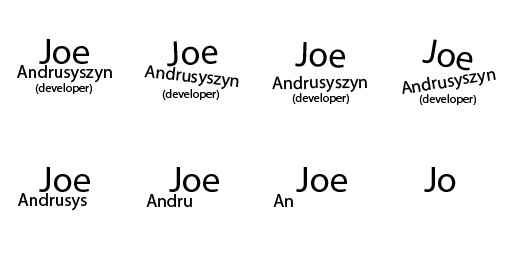
<style>
.page{position:relative;width:512px;height:256px;background:#ffffff}
.page>*{position:absolute;margin:0}
.t1{font:36px "MyriadPro-Regular";color:#000000}
.t2{font:18px "MyriadPro-Regular";color:#000000}
.t3{font:12px "MyriadPro-Regular";color:#000000}
</style>
<div class="page">
<p class="t1" style="left:39px;top:39px;width:50px;height:25px">Joe</p>
<p class="t1" style="left:167px;top:41px;width:51px;height:26px;rotate:-3deg">Joe</p>
<p class="t1" style="left:422px;top:39px;width:51px;height:32px;rotate:10deg">Joe</p>
<p class="t1" style="left:295px;top:42px;width:50px;height:26px;rotate:2deg">Joe</p>
<p class="t2" style="left:17px;top:65px;width:95px;height:18px">Andrusyszyn</p>
<p class="t2" style="left:144px;top:65px;width:95px;height:25px;rotate:6deg">Andrusyszyn</p>
<p class="t2" style="left:272px;top:76px;width:95px;height:16px;rotate:-1deg">Andrusyszyn</p>
<p class="t2" style="left:402px;top:71px;width:94px;height:23px;rotate:-9deg">Andrusyszyn</p>
<p class="t3" style="left:35px;top:83px;width:57px;height:11px">(developer)</p>
<p class="t3" style="left:162px;top:89px;width:57px;height:11px">(developer)</p>
<p class="t3" style="left:292px;top:93px;width:57px;height:11px">(developer)</p>
<p class="t3" style="left:419px;top:94px;width:57px;height:11px">(developer)</p>
<p class="t1" style="left:39px;top:167px;width:51px;height:25px">Joe</p>
<p class="t1" style="left:169px;top:167px;width:50px;height:25px">Joe</p>
<p class="t1" style="left:296px;top:167px;width:51px;height:25px">Joe</p>
<p class="t1" style="left:424px;top:167px;width:32px;height:25px">Jo</p>
<p class="t2" style="left:18px;top:193px;width:69px;height:18px">Andrusys</p>
<p class="t2" style="left:146px;top:194px;width:46px;height:13px">Andru</p>
<p class="t2" style="left:273px;top:194px;width:20px;height:13px">An</p>
</div>
